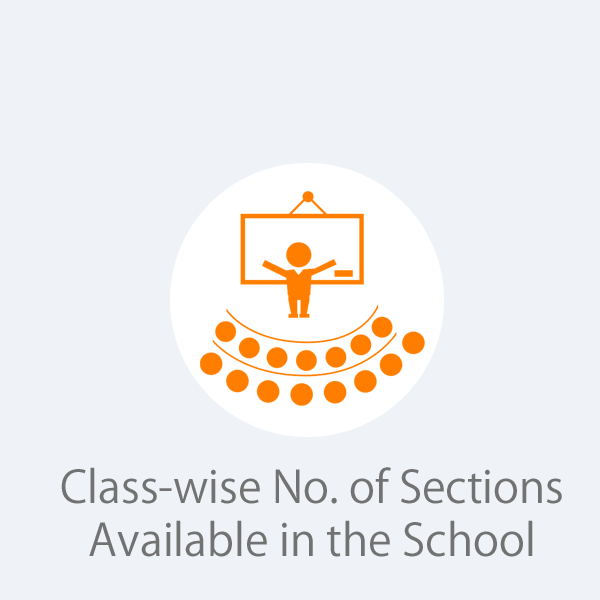
<style>
.page{position:relative;width:600px;height:600px;background:#eff3f8}
.page>*{position:absolute;margin:0}
.t1{font:44px "KozGoPro-Regular";color:#727272}
</style>
<div class="page">
<p class="t1" style="left:61px;top:467px;width:501px;height:90px;text-align:center">Class-wise No. of Sections<br>Available in the School</p>
</div>
